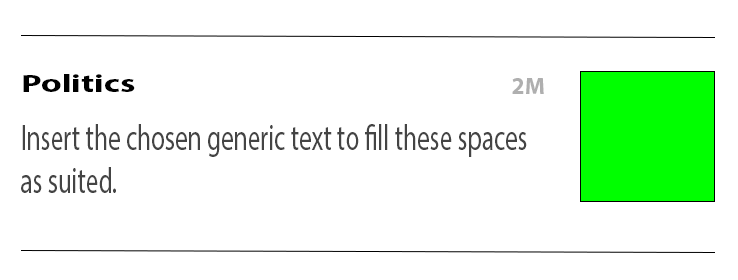
<style>
.page{position:relative;width:738px;height:280px;background:#ffffff}
.page>*{position:absolute;margin:0}
.t1{font:25.2px "MyriadPro-Bold";color:#000000;scale:1.42 1}
.t2{font:23.8px "MyriadPro-Bold";color:#afafaf}
.t3{font:36px "MyriadPro-Regular";color:#444444;scale:0.7 1}
</style>
<div class="page">
<p class="t1" style="left:23px;top:74px;width:112px;height:18px">Politics</p>
<p class="t2" style="left:512px;top:78px;width:32px;height:16px">2M</p>
<p class="t3" style="left:21px;top:124px;width:506px;height:69px">Insert the chosen generic text to fill these spaces<br>as suited.</p>
</div>
